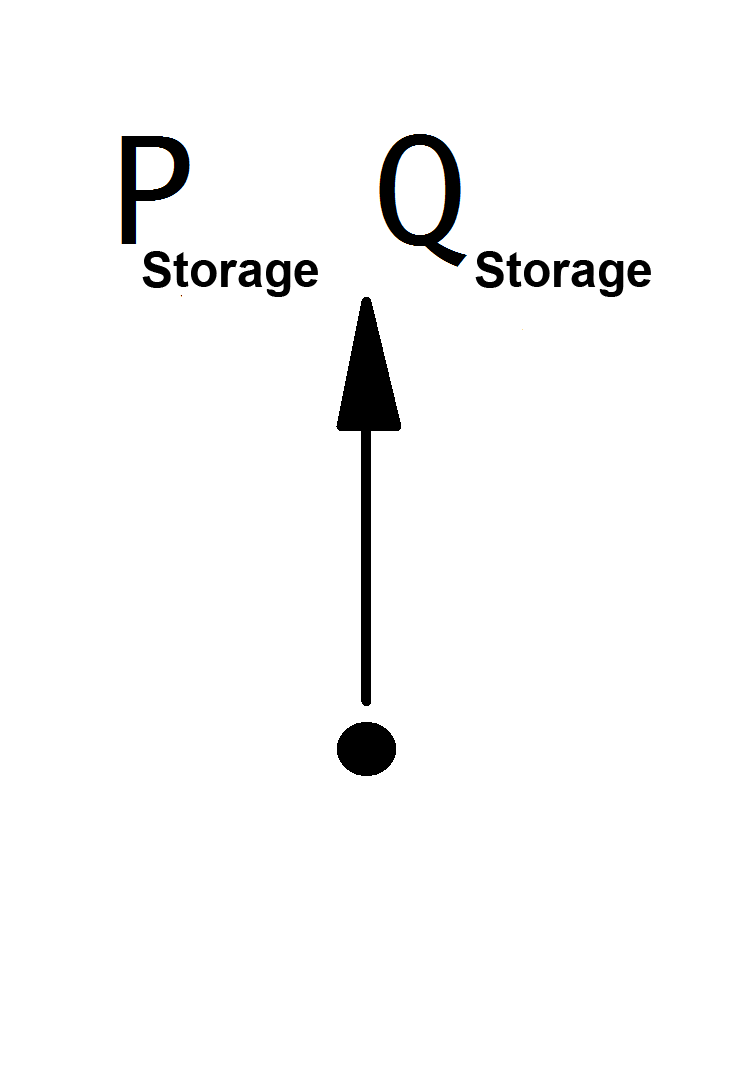
<style>
.page{position:relative;width:732px;height:1090px;background:#ffffff}
.page>*{position:absolute;margin:0}
.t1{font:48px "Arial-BoldMT";color:#000000}
</style>
<div class="page">
<p class="t1" style="left:142px;top:251px;width:176px;height:46px">Storage</p>
<p class="t1" style="left:475px;top:251px;width:176px;height:46px">Storage</p>
</div>
